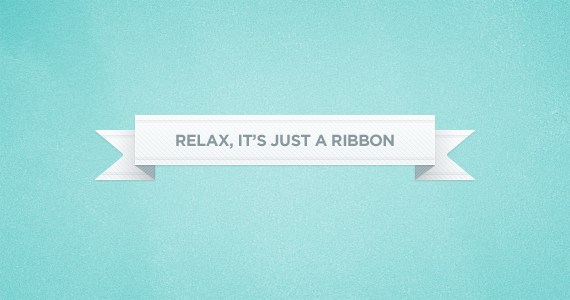
<style>
.page{position:relative;width:570px;height:300px}
.page>*{position:absolute;margin:0}
.t1{font:16px "GothamBold";letter-spacing:-0.03em;color:#87999f;text-transform:uppercase}
</style>
<div class="page">
<p class="t1" style="left:176px;top:134px;width:218px;height:15px">relax, it’s just a ribbon</p>
</div>
